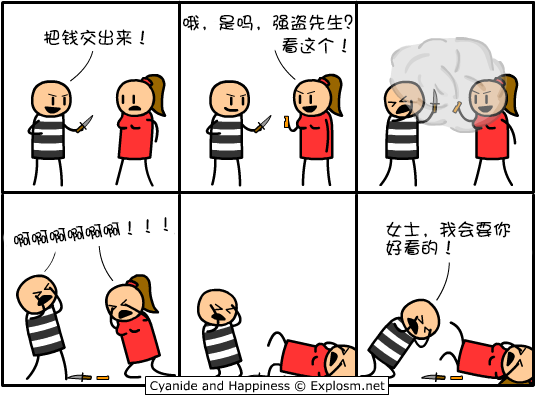
<style>
.page{position:relative;width:536px;height:396px;background:#ffffff}
.page>*{position:absolute;margin:0}
.t1{font:18px "DFShaoNvW5";color:#000000}
.t2{font:17.9px "DFShaoNvW5";color:#000000}
.t3{font:18px/18px "DFShaoNvW5";color:#000000}
</style>
<div class="page">
<p class="t1" style="left:183px;top:14px;width:170px;height:17px">哦，是吗，强盗先生？</p>
<p class="t1" style="left:43px;top:29px;width:102px;height:17px">把钱交出来！</p>
<p class="t1" style="left:282px;top:37px;width:65px;height:17px">看这个！</p>
<p class="t2" style="left:14px;top:217px;width:154px;height:31px;rotate:-6deg">啊啊啊啊啊啊！！！</p>
<p class="t3" style="left:386px;top:221px;width:125px;height:35px">女士，我会要你<br>好看的！</p>
</div>
